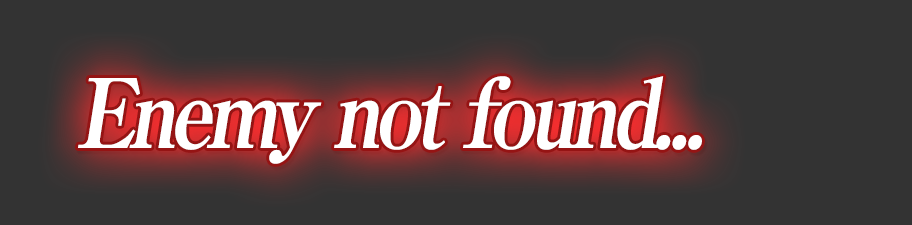
<style>
.page{position:relative;width:912px;height:225px;background:#333333}
.page>*{position:absolute;margin:0}
.t1{font:96px "RyuminPro-ExBold";letter-spacing:-0.08em;color:#ffffff;font-style:italic;scale:0.9 1}
.t2{font:96px "RyuminPro-ExBold";letter-spacing:-0.04em;color:#ffffff;font-style:italic;scale:0.9 1}
</style>
<div class="page">
<p class="t1" style="left:78px;top:76px;width:624px;height:88px">Enemy not found<span class="t2">...</span></p>
</div>
